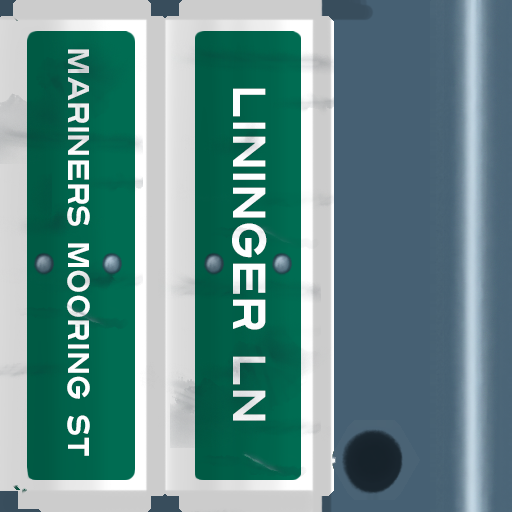
<style>
.page{position:relative;width:512px;height:512px}
.page>*{position:absolute;margin:0}
.t1{font:30px "Turnpike";color:#fefeff;scale:0.75 1}
.t2{font:46px "Turnpike";color:#fefeff;scale:0.75 1}
</style>
<div class="page">
<p class="t1" style="left:67px;top:49px;width:23px;height:407px;rotate:90deg">Mariners Mooring ST</p>
<p class="t2" style="left:232px;top:88px;width:35px;height:333px;rotate:90deg">Lininger Ln</p>
</div>
